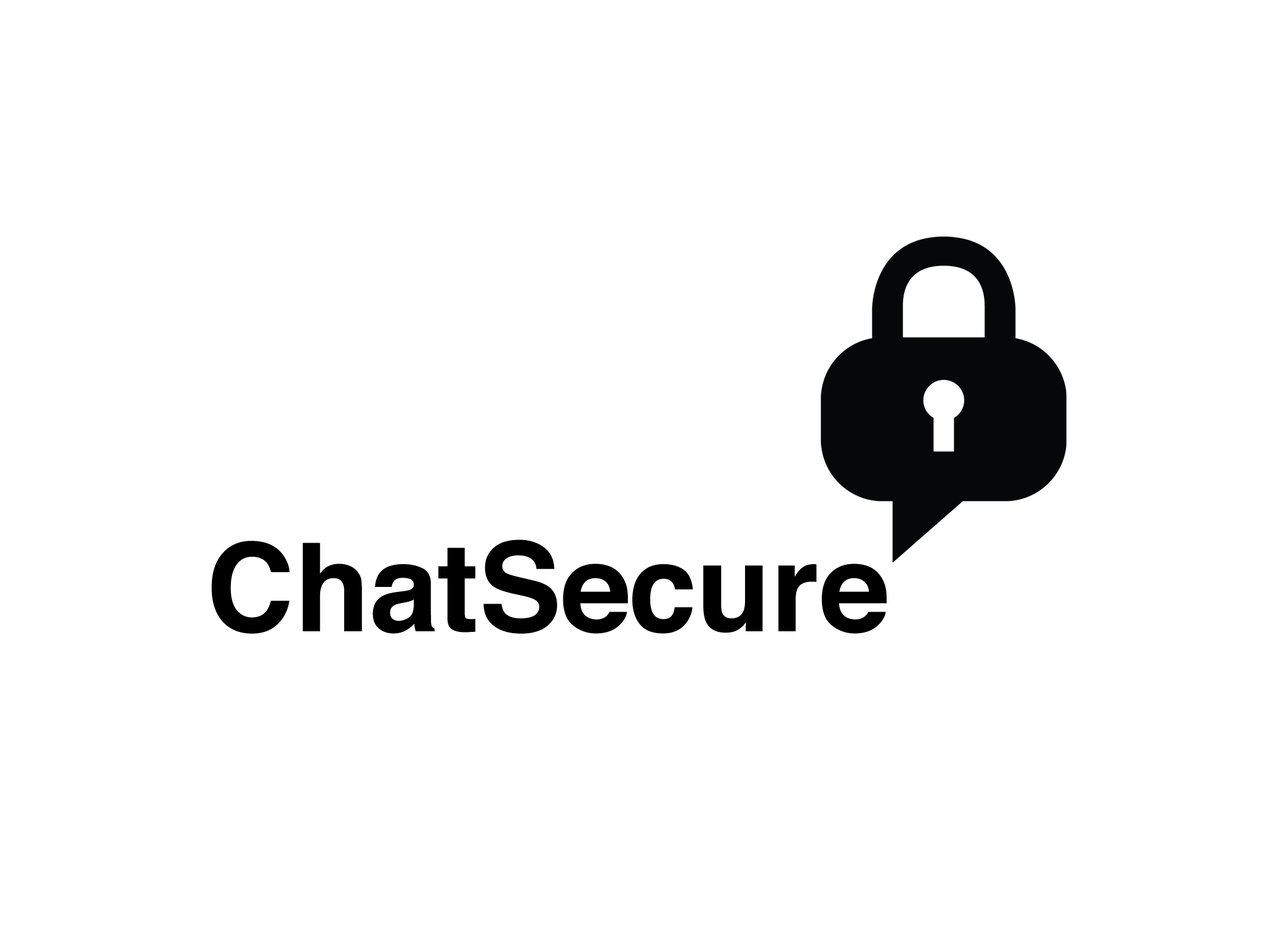
<style>
.page{position:relative;width:1261px;height:946px;background:#ffffff}
.page>*{position:absolute;margin:0}
.t1{font:123px "Helvetica-Bold";color:#000000}
</style>
<div class="page">
<p class="t1" style="left:211px;top:539px;width:676px;height:95px">ChatSecure</p>
</div>
